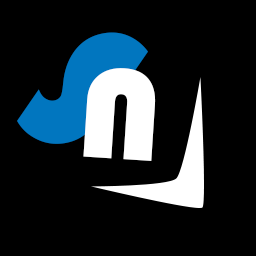
<style>
.page{position:relative;width:256px;height:256px;background:#000000}
.page>*{position:absolute;margin:0}
.t1{font:197.6px "Bauhaus93";letter-spacing:-0.04em;color:#0176bf}
.t2{font:132.7px "Bauhaus93";letter-spacing:-0.04em;color:#ffffff;scale:1.06 1}
</style>
<div class="page">
<p class="t1" style="left:17px;top:32px;width:131px;height:112px;rotate:35deg">S</p>
<p class="t2" style="left:83px;top:68px;width:73px;height:93px;rotate:4deg">N</p>
</div>
